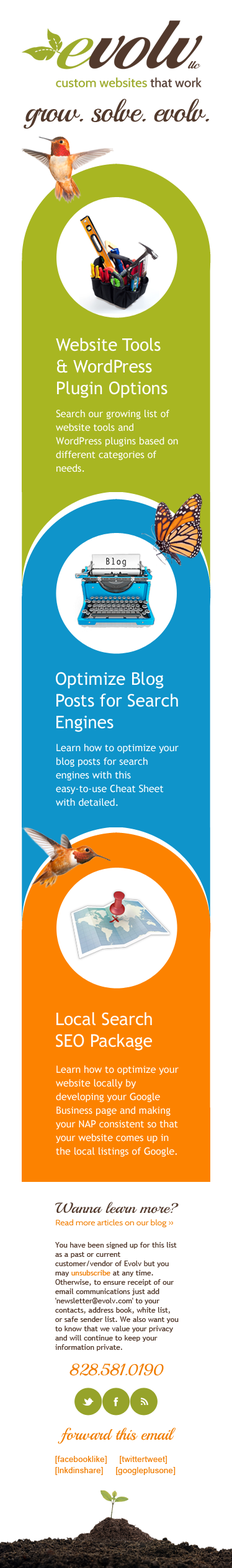
<style>
.page{position:relative;width:232px;height:1568px;background:#ffffff}
.page>*{position:absolute;margin:0}
.t1{font:30.4px "Playball-Regular";letter-spacing:-0.05em;color:#52392c}
.t2{font:17.4px/21.7px "TrebuchetMS";color:#ffffff}
.t3{font:9.9px/13.6px "TrebuchetMS";color:#ffffff}
.t4{font:7.8px/12.4px "Cabin-Regular";color:#f07c00;scale:1.11 1}
.t5{font:14.5px "Playball-Regular";color:#52392c;scale:1.11 1}
.t6{font:7.4px/9.3px "TrebuchetMS";color:#52392c}
.t7{font:7.4px/9.3px "TrebuchetMS";color:#f07c00}
.t8{font:16.1px/12.9px "Playball-Regular";color:#f07c00}
.t9{font:8.1px/11.2px "ArialMT";letter-spacing:0.025em;color:#f07c00}
</style>
<div class="page">
<p class="t1" style="left:24px;top:99px;width:185px;height:30px">grow. solve. evolv.</p>
<p class="t2" style="left:56px;top:338px;width:111px;height:60px">Website Tools <br>&amp; WordPress <br>Plugin Options</p>
<p class="t3" style="left:56px;top:410px;width:122px;height:62px">Search our growing list of website tools and WordPress plugins based on different categories of needs.</p>
<p class="t2" style="left:56px;top:672px;width:122px;height:60px">Optimize Blog <br>Posts for Search <br>Engines</p>
<p class="t3" style="left:56px;top:744px;width:122px;height:62px">Learn how to optimize your blog posts for search engines with this easy-to-use Cheat Sheet with detailed.</p>
<p class="t2" style="left:56px;top:1012px;width:96px;height:38px">Local Search <br>SEO Package</p>
<p class="t3" style="left:56px;top:1065px;width:122px;height:92px">Learn how to optimize your website locally by developing your Google Business page and making your NAP consistent so that your website comes up in the local listings of Google.</p>
<p class="t4" style="left:55px;top:1202px;width:123px;height:26px"><span class="t5">Wanna learn more? <br></span>Read more articles on our blog »</p>
<p class="t6" style="left:55px;top:1242px;width:123px;height:109px">You have been signed up for this list as a past or current customer/vendor of Evolv but you may <span class="t7">unsubscribe </span>at any time. Otherwise, to ensure receipt of our email communications just add 'newsletter@evolv.com' to your contacts, address book, white list, or safe sender list. We also want you to know that we value your privacy and will continue to keep your information private.</p>
<p class="t8" style="left:58px;top:1363px;width:117px;height:81px;text-align:center">828.581.0190<br><br><br><br><br>forward this email</p>
<p class="t9" style="left:55px;top:1456px;width:120px;height:19px">[facebooklike]     [twittertweet]     [lnkdinshare]     [googleplusone]</p>
</div>
